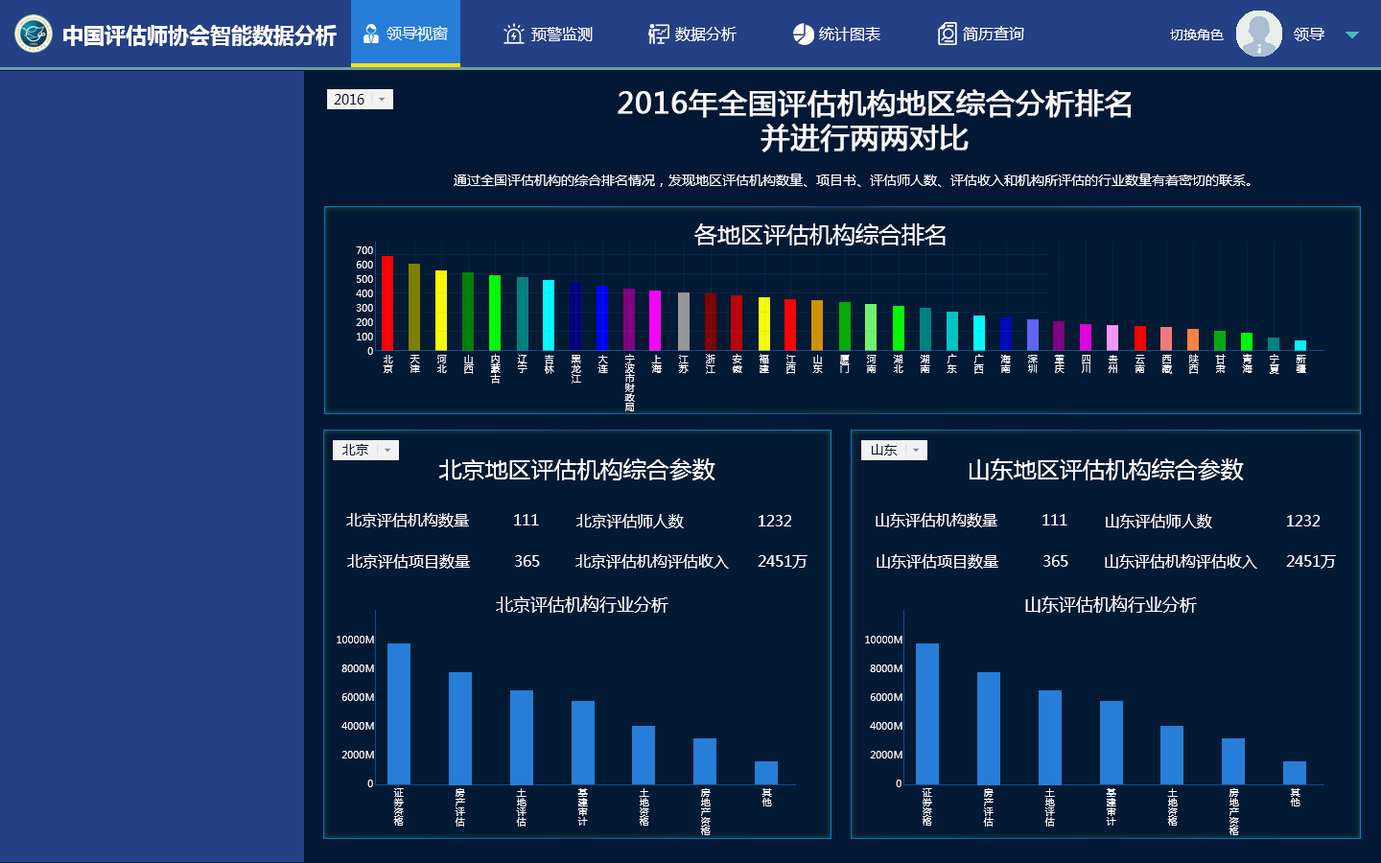
<style>
.page{position:relative;width:1381px;height:863px;background:#031a35}
.page>*{position:absolute;margin:0}
.t1{font:21.1px "MicrosoftYaHei-Bold";color:#ffffff}
.t2{font:15.3px "MicrosoftYaHei";color:#ffffff}
.t3{font:13.4px "MicrosoftYaHei";color:#ffffff}
.t4{font:28.8px/34.5px "MicrosoftYaHei";color:#f9fbfc;font-weight:bold}
.t5{font:13.4px "MicrosoftYaHei";color:#031a35}
.t6{font:13.4px "MicrosoftYaHei";color:#f9fbfc}
.t7{font:23px "MicrosoftYaHei";color:#fefeff}
.t8{font:9.6px/14.4px "MicrosoftYaHei";color:#fefeff}
.t9{font:9.6px/26.9px "MicrosoftYaHei";color:#fefeff}
.t10{font:15.3px "MicrosoftYaHei";color:#fefeff}
.t11{font:17.3px "MicrosoftYaHei";color:#fefeff}
.t12{font:9.6px/28.8px "MicrosoftYaHei";color:#fefeff}
.t13{font:9.6px/61.4px "MicrosoftYaHei";color:#fefeff}
</style>
<div class="page">
<p class="t1" style="left:63px;top:25px;width:274px;height:21px">中国评估师协会智能数据分析</p>
<p class="t2" style="left:387px;top:26px;width:61px;height:15px">领导视窗</p>
<p class="t2" style="left:531px;top:27px;width:62px;height:14px">预警监测</p>
<p class="t2" style="left:675px;top:27px;width:62px;height:14px">数据分析</p>
<p class="t2" style="left:819px;top:27px;width:62px;height:14px">统计图表</p>
<p class="t2" style="left:963px;top:26px;width:61px;height:15px">简历查询</p>
<p class="t3" style="left:1170px;top:29px;width:54px;height:11px">切换角色</p>
<p class="t2" style="left:1294px;top:28px;width:31px;height:13px">领导</p>
<p class="t4" style="left:618px;top:89px;width:513px;height:64px;text-align:justify">2016年全国评估机构地区综合分析排名<br>               并进行两两对比</p>
<p class="t5" style="left:334px;top:94px;width:31px;height:11px">2016</p>
<p class="t6" style="left:454px;top:174px;width:797px;height:13px">通过全国评估机构的综合排名情况，发现地区评估机构数量、项目书、评估师人数、评估收入和机构所评估的行业数量有着密切的联系。</p>
<p class="t7" style="left:694px;top:223px;width:252px;height:23px">各地区评估机构综合排名</p>
<p class="t8" style="left:356px;top:247px;width:17px;height:108px;text-align:justify">700<br>600<br>500<br>400<br>300<br>200<br>100<br>    0</p>
<p class="t9" style="left:383px;top:354px;width:923px;height:58px;text-align:justify">新疆<br>宁夏 <br>青海 <br>甘肃 <br>陕西 <br>西藏 <br>云南<br>贵州<br>四川<br>重庆 <br>深圳 <br>海南 <br>广西 <br>广东 <br>湖南 <br>湖北 <br>河南 <br>厦门 <br>山东 <br>江西<br>福建<br>安徽 <br>浙江 <br>江苏 <br>上海 <br>宁波市财政局 <br>大连 <br>黑龙江<br>吉林 <br>辽宁 <br>内蒙古<br>山西 <br>河北 <br>天津 <br>北京</p>
<p class="t5" style="left:342px;top:444px;width:27px;height:12px">北京</p>
<p class="t5" style="left:872px;top:444px;width:26px;height:12px">山东</p>
<p class="t7" style="left:439px;top:459px;width:277px;height:22px">北京地区评估机构综合参数</p>
<p class="t7" style="left:970px;top:459px;width:274px;height:22px">山东地区评估机构综合参数</p>
<p class="t10" style="left:346px;top:513px;width:193px;height:15px">北京评估机构数量        111</p>
<p class="t10" style="left:576px;top:514px;width:215px;height:15px">北京评估师人数          1232</p>
<p class="t10" style="left:876px;top:513px;width:192px;height:15px">山东评估机构数量        111</p>
<p class="t10" style="left:1106px;top:514px;width:214px;height:15px">山东评估师人数          1232</p>
<p class="t10" style="left:347px;top:554px;width:193px;height:15px">北京评估项目数量        365</p>
<p class="t10" style="left:576px;top:554px;width:232px;height:15px">北京评估机构评估收入    2451万</p>
<p class="t10" style="left:877px;top:554px;width:192px;height:15px">山东评估项目数量        365</p>
<p class="t10" style="left:1105px;top:554px;width:231px;height:15px">山东评估机构评估收入    2451万</p>
<p class="t11" style="left:496px;top:596px;width:173px;height:17px">北京评估机构行业分析</p>
<p class="t11" style="left:1025px;top:596px;width:172px;height:17px">山东评估机构行业分析</p>
<p class="t12" style="left:337px;top:636px;width:37px;height:152px;text-align:justify">10000M<br>  8000M<br>  6000M<br>  4000M<br>  2000M<br>           0</p>
<p class="t12" style="left:865px;top:636px;width:38px;height:152px;text-align:justify">10000M<br>  8000M<br>  6000M<br>  4000M<br>  2000M<br>           0</p>
<p class="t13" style="left:393px;top:788px;width:379px;height:47px;text-align:justify">其他<br>房地产资格<br>土地资格<br>基建审计<br>土地评估<br>房产评估<br>证券资格</p>
<p class="t13" style="left:922px;top:788px;width:379px;height:47px;text-align:justify">其他<br>房地产资格<br>土地资格<br>基建审计<br>土地评估<br>房产评估<br>证券资格</p>
</div>
